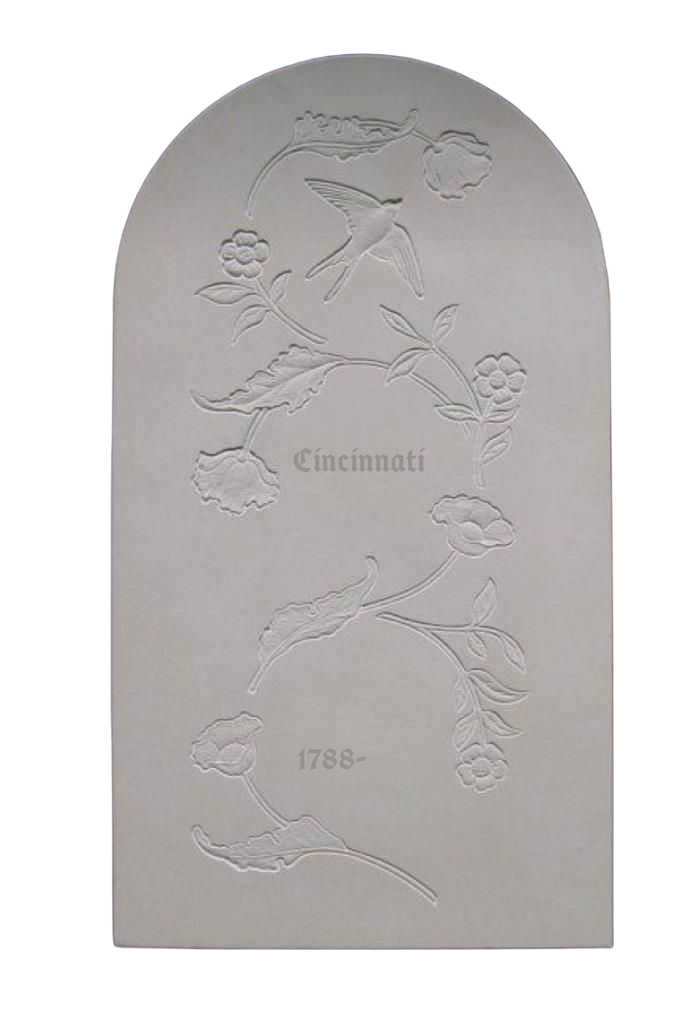
<style>
.page{position:relative;width:695px;height:1024px;background:#ffffff}
.page>*{position:absolute;margin:0}
.t1{font:36px "Cabazon";color:#959392}
</style>
<div class="page">
<p class="t1" style="left:293px;top:447px;width:133px;height:26px">Cincinnati</p>
<p class="t1" style="left:296px;top:748px;width:70px;height:23px">1788-</p>
</div>
